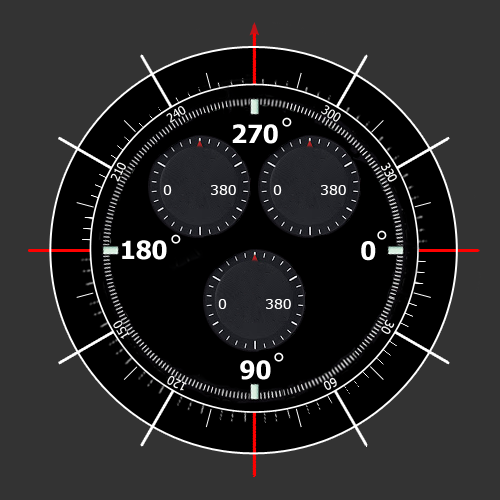
<style>
.page{position:relative;width:500px;height:500px;background:#333333}
.page>*{position:absolute;margin:0}
.t1{font:12px "Tahoma";color:#ffffff}
.t2{font:25px "Tahoma-Bold";color:#ffffff}
.t3{font:14px "Verdana";color:#ffffff}
</style>
<div class="page">
<p class="t1" style="left:166px;top:106px;width:20px;height:17px;rotate:-33deg">240</p>
<p class="t1" style="left:321px;top:105px;width:20px;height:17px;rotate:31deg">300</p>
<p class="t2" style="left:232px;top:124px;width:46px;height:20px">270</p>
<p class="t1" style="left:110px;top:162px;width:16px;height:20px;rotate:-64deg">210</p>
<p class="t1" style="left:380px;top:162px;width:17px;height:20px;rotate:61deg">330</p>
<p class="t3" style="left:163px;top:185px;width:9px;height:10px">0</p>
<p class="t3" style="left:211px;top:185px;width:25px;height:10px">380</p>
<p class="t3" style="left:273px;top:185px;width:9px;height:10px">0</p>
<p class="t3" style="left:321px;top:185px;width:25px;height:10px">380</p>
<p class="t2" style="left:122px;top:240px;width:45px;height:20px">180</p>
<p class="t2" style="left:361px;top:241px;width:15px;height:20px">0</p>
<p class="t3" style="left:218px;top:299px;width:9px;height:10px">0</p>
<p class="t3" style="left:266px;top:299px;width:25px;height:10px">380</p>
<p class="t1" style="left:113px;top:320px;width:17px;height:19px;rotate:-122deg">150</p>
<p class="t1" style="left:381px;top:319px;width:14px;height:15px;rotate:119deg">30</p>
<p class="t2" style="left:240px;top:360px;width:31px;height:20px">90</p>
<p class="t1" style="left:167px;top:375px;width:20px;height:16px;rotate:-154deg">120</p>
<p class="t1" style="left:323px;top:377px;width:14px;height:13px;rotate:153deg">60</p>
</div>
